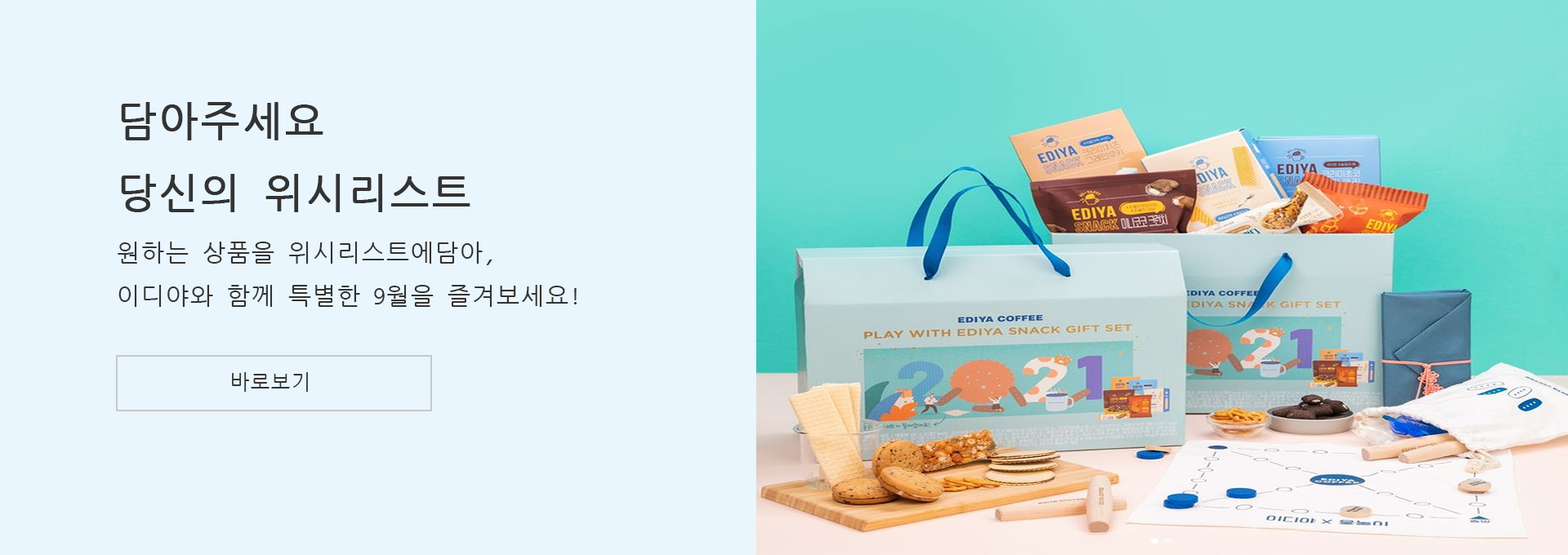
<style>
.page{position:relative;width:1568px;height:555px;background:#e9f6fe}
.page>*{position:absolute;margin:0}
.t1{font:40.8px "NanumGothicCoding";color:#333333;font-weight:bold}
.t2{font:24.5px "NanumGothicCoding";color:#333333}
.t3{font:20.4px "NanumGothicCoding";color:#333333}
</style>
<div class="page">
<p class="t1" style="left:121px;top:102px;width:349px;height:110px">담아주세요<br>당신의 위시리스트</p>
<p class="t2" style="left:118px;top:242px;width:459px;height:65px">원하는 상품을 위시리스트에담아,<br>이디야와 함께 특별한 9월을 즐겨보세요!</p>
<p class="t3" style="left:232px;top:372px;width:76px;height:20px">바로보기</p>
</div>
